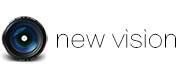
<style>
.page{position:relative;width:192px;height:64px;background:#ffffff}
.page>*{position:absolute;margin:0}
.t1{font:24px "FZLTCXHJW--GB1-0";color:#000000}
</style>
<div class="page">
<p class="t1" style="left:112px;top:29px;width:64px;height:19px">vision</p>
<p class="t1" style="left:57px;top:33px;width:48px;height:15px">new</p>
</div>
